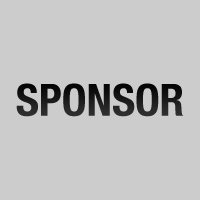
<style>
.page{position:relative;width:200px;height:200px;background:#cccccc}
.page>*{position:absolute;margin:0}
.t1{font:44.3px "HelveticaNeue-CondensedBold";color:#191919}
</style>
<div class="page">
<p class="t1" style="left:16px;top:83px;width:168px;height:34px">SPONSOR</p>
</div>
